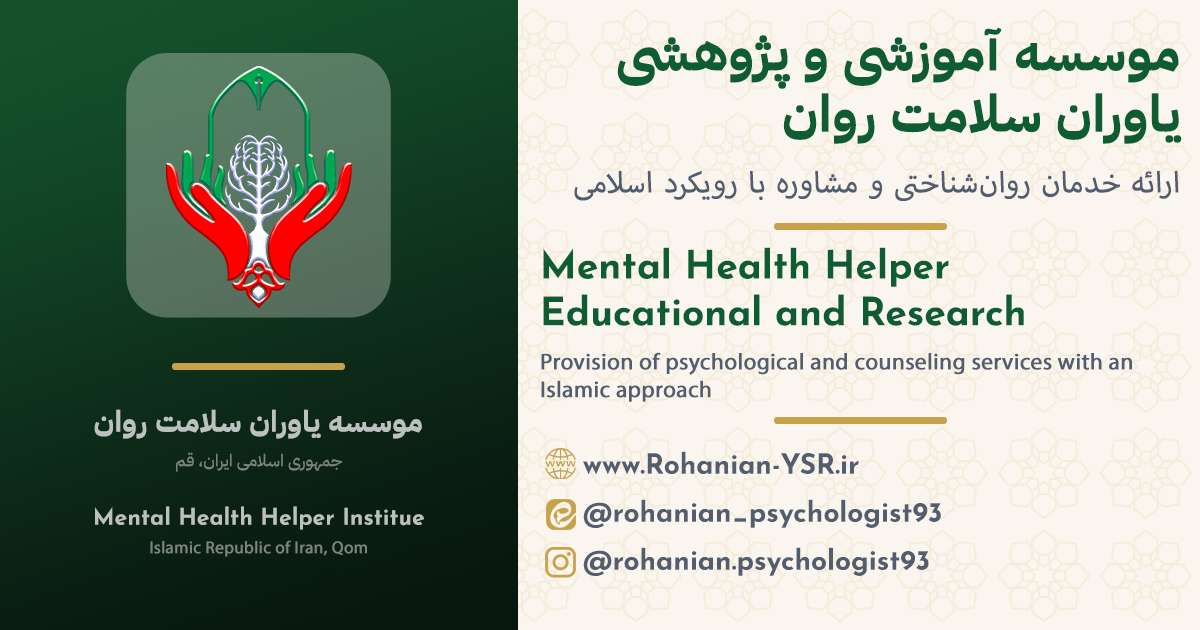
<style>
.page{position:relative;width:1200px;height:630px;background:#faf6ef}
.page>*{position:absolute;margin:0}
.t1{font:51px "IBMPlexArabic-Bold";color:#0d5c32;font-weight:bold}
.t2{font:41px "MyriadArabic-Regular";color:#525d6e;font-weight:bold}
.t3{font:41px "MyriadPro-Regular";color:#525d6e;font-weight:bold}
.t4{font:39px "JosefinSansRoman-Bold";color:#0d5c32;font-weight:bold}
.t5{font:23px "MyriadPro-Regular";color:#525d6e;font-weight:bold}
.t6{font:29px "IBMPlexArabic-Bold";color:#bbc1be;font-weight:bold}
.t7{font:17px "IBMPlexSansArabic-Medium";color:#79847e}
.t8{font:28px/48px "JosefinSansRoman-Bold";color:#525d6e;font-weight:bold}
.t9{font:23px "JosefinSansRoman-Bold";color:#bbc1be;font-weight:bold}
.t10{font:17px "MyriadPro-Regular";color:#79847e;font-weight:bold}
</style>
<div class="page">
<p class="t1" style="left:617px;top:27px;width:565px;height:117px;text-align:right">موسسه آموزشی و پژوهشی یاوران سلامت روان</p>
<p class="t2" style="left:574px;top:170px;width:605px;height:31px">ارائه خدمان روان<span class="t3">‌</span>شناختی و مشاوره با رویکرد اسلامی</p>
<p class="t4" style="left:543px;top:247px;width:481px;height:79px">Mental Health Helper Educational and Research Institute</p>
<p class="t5" style="left:541px;top:352px;width:591px;height:50px">Provision of psychological and counseling services with an Islamic approach</p>
<p class="t6" style="left:94px;top:409px;width:328px;height:30px">موسسه یاوران سلامت روان</p>
<p class="t7" style="left:176px;top:452px;width:166px;height:20px">جمهوری اسلامی ایران، قم</p>
<p class="t8" style="left:583px;top:451px;width:358px;height:125px">www.Rohanian-YSR.ir<br>@rohanian_psychologist93<br>@rohanian.psychologist93</p>
<p class="t9" style="left:95px;top:506px;width:329px;height:24px">Mental Health Helper Institue</p>
<p class="t10" style="left:150px;top:540px;width:217px;height:17px">Islamic Republic of Iran, Qom</p>
</div>
